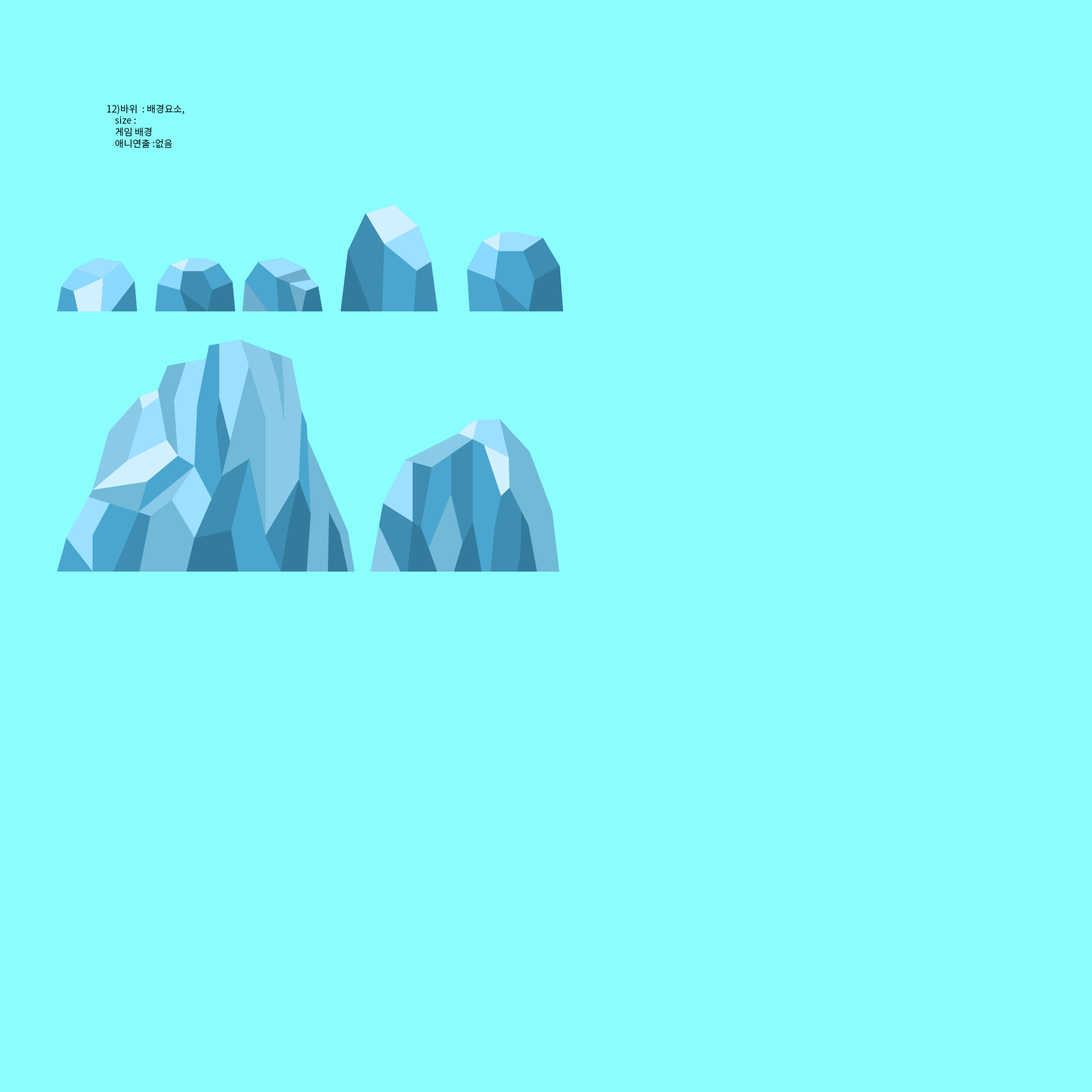
<style>
.page{position:relative;width:1092px;height:1092px;background:#8afffd}
.page>*{position:absolute;margin:0}
.t1{font:9.6px "NotoSansCJKkr-DemiLight";color:#000000}
</style>
<div class="page">
<p class="t1" style="left:107px;top:104px;width:77px;height:44px">12)바위  : 배경요소,   <br>    size : <br>    게임 배경<br>    애니연출 :없음</p>
</div>
